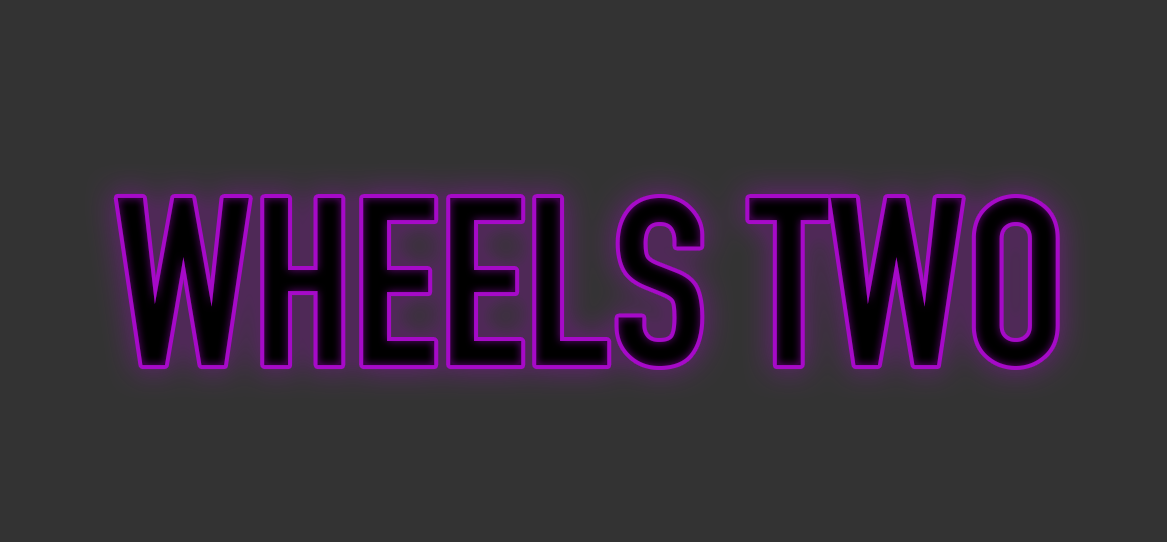
<style>
.page{position:relative;width:1167px;height:542px;background:#333333}
.page>*{position:absolute;margin:0}
.t1{font:233.7px "DINEngschrift";color:#070009}
</style>
<div class="page">
<p class="t1" style="left:117px;top:197px;width:939px;height:169px">WHEELS TWO</p>
</div>
